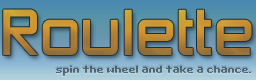
<style>
.page{position:relative;width:256px;height:80px}
.page>*{position:absolute;margin:0}
.t1{font:60px "ZeroThrees"}
.t2{font:10px "Bit-Darling10-(sRB)";color:#52646e}
</style>
<div class="page">
<p class="t1" style="left:3px;top:9px;width:249px;height:46px">Roulette</p>
<p class="t2" style="left:56px;top:66px;width:195px;height:10px">spin the wheel and take a chance.</p>
</div>
